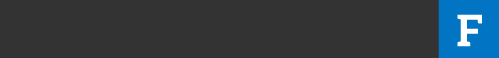
<style>
.page{position:relative;width:499px;height:58px;background:#333333}
.page>*{position:absolute;margin:0}
.t1{font:42.7px "Aleo-Bold";color:#ffffff;font-weight:bold}
</style>
<div class="page">
<p class="t1" style="left:457px;top:14px;width:25px;height:33px">F</p>
</div>
